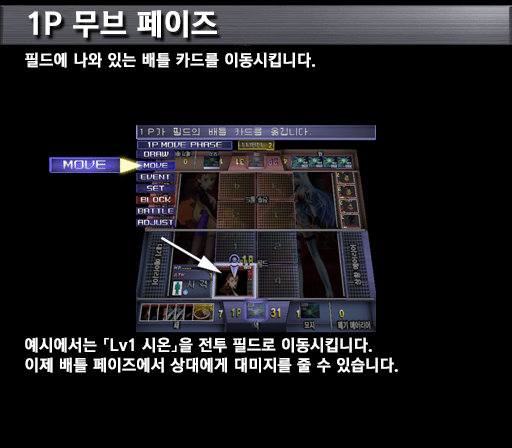
<style>
.page{position:relative;width:512px;height:448px;background:#000000}
.page>*{position:absolute;margin:0}
.t1{font:30px "KoreanGD15-R";color:#ffffff;font-weight:bold}
.t2{font:16px "KoreanGD15-R";color:#ffffff;font-weight:bold}
.t3{font:16px/20px "KoreanGD15-R";color:#ffffff;font-weight:bold}
</style>
<div class="page">
<p class="t1" style="left:28px;top:10px;width:189px;height:28px">1P 무브 페이즈</p>
<p class="t2" style="left:25px;top:52px;width:290px;height:16px">필드에 나와 있는 배틀 카드를 이동시킵니다.</p>
<p class="t3" style="left:25px;top:337px;width:373px;height:36px">예시에서는 「Lv1 시온」을 전투 필드로 이동시킵니다.<br>이제 배틀 페이즈에서 상대에게 대미지를 줄 수 있습니다.</p>
</div>
